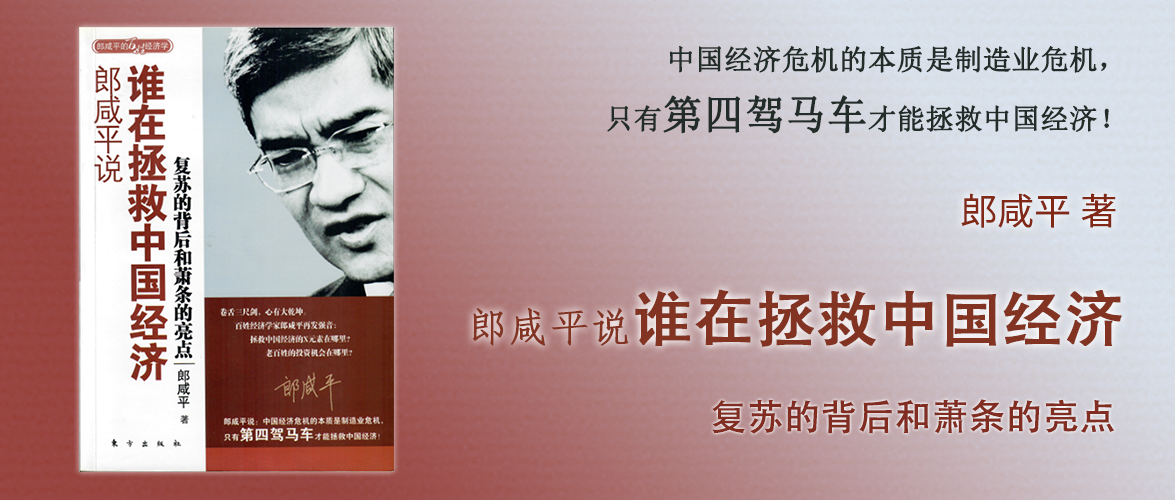
<style>
.page{position:relative;width:1175px;height:500px}
.page>*{position:absolute;margin:0}
.t1{font:28px "SimSun";color:#222c29;font-weight:bold}
.t2{font:40px "SimSun";color:#222c29;font-weight:bold}
.t3{font:36px "KozGoPr6N-Regular";color:#822817;font-weight:bold}
.t4{font:60px "AdobeHeitiStd-Regular";color:#823321;font-weight:bold}
.t5{font:40px "FangSong";color:#823321;font-weight:bold}
.t6{font:36px "AdobeHeitiStd-Regular";color:#822d22;font-weight:bold}
</style>
<div class="page">
<p class="t1" style="left:607px;top:45px;width:502px;height:89px;text-align:right">中国经济危机的本质是制造业危机，<br>只有<span class="t2">第四驾马车</span>才能拯救中国经济！</p>
<p class="t3" style="left:961px;top:193px;width:155px;height:35px">郎咸平 著</p>
<p class="t4" style="left:473px;top:289px;width:649px;height:58px"><span class="t5">郎咸平说</span>谁在拯救中国经济</p>
<p class="t6" style="left:712px;top:399px;width:402px;height:35px">复苏的背后和萧条的亮点</p>
</div>
